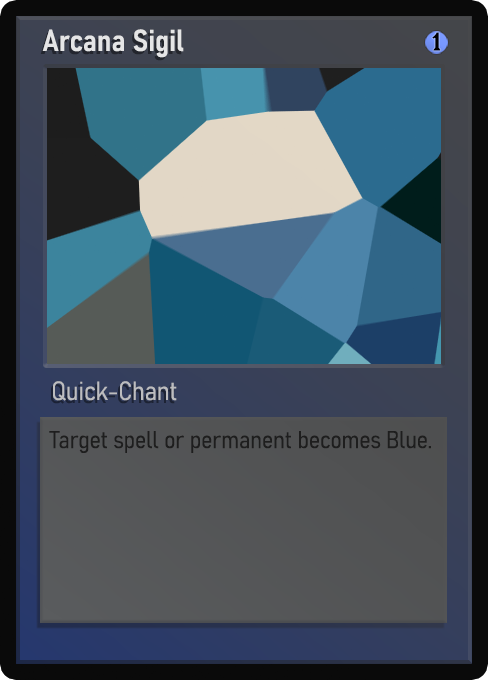
<style>
.page{position:relative;width:488px;height:680px}
.page>*{position:absolute;margin:0}
.t1{font:30px "Bahnschrift-SemiBoldSemiCondensed";color:#f2f2f2;font-weight:bold}
.t2{font:25px "WTRRoycroft";color:#000000;font-weight:bold;scale:1.09 1}
.t3{font:26px "Bahnschrift-LightSemiCondensed";color:#c8c8c8;font-weight:bold}
.t4{font:24px "Bahnschrift-LightSemiCondensed";color:#1e1e1e;font-weight:bold}
</style>
<div class="page">
<p class="t1" style="left:42px;top:29px;width:142px;height:29px;opacity:0.9">Arcana Sigil</p>
<p class="t2" style="left:432px;top:32px;width:9px;height:19px">1</p>
<p class="t3" style="left:53px;top:381px;width:124px;height:20px;opacity:0.9">Quick-Chant</p>
<p class="t4" style="left:49px;top:431px;width:382px;height:22px">Target spell or permanent becomes Blue.</p>
</div>
